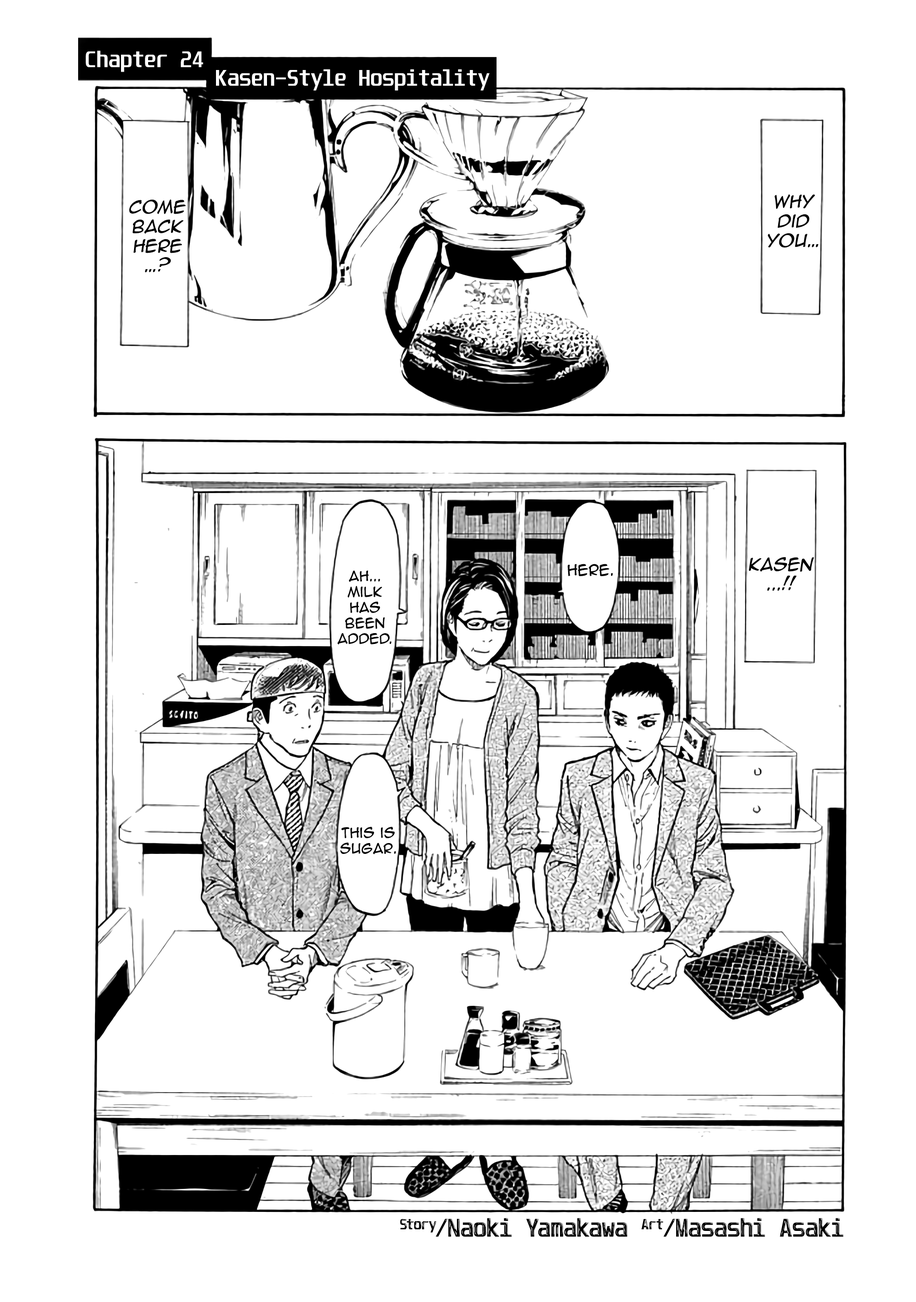
<style>
.page{position:relative;width:916px;height:1302px;background:#ffffff}
.page>*{position:absolute;margin:0}
.t1{font:19.5px "Unispace-Bold";color:#ffffff}
.t2{font:16.3px "AnimeAce2.0BB";color:#000000;font-style:italic}
.t3{font:14.1px "AnimeAce2.0BB";color:#000000}
.t4{font:13px "AnimeAce2.0BB";color:#000000}
</style>
<div class="page">
<p class="t1" style="left:86px;top:50px;width:117px;height:22px">Chapter 24</p>
<p class="t1" style="left:216px;top:69px;width:273px;height:22px">Kasen-Style Hospitality</p>
<p class="t2" style="left:768px;top:194px;width:50px;height:54px;text-align:center">Why did you…</p>
<p class="t2" style="left:129px;top:199px;width:57px;height:73px;text-align:center">Come back here<br>…?</p>
<p class="t2" style="left:749px;top:557px;width:65px;height:34px;text-align:center">Kasen<br>...!!</p>
<p class="t3" style="left:567px;top:564px;width:46px;height:12px">Here.</p>
<p class="t4" style="left:337px;top:570px;width:55px;height:75px;text-align:center">ah...<br>Milk<br>has<br>been added.</p>
<p class="t4" style="left:340px;top:827px;width:56px;height:27px;text-align:center">This is sugar.</p>
</div>
